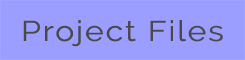
<style>
.page{position:relative;width:245px;height:60px;background:#9b9eff}
.page>*{position:absolute;margin:0}
.t1{font:28.5px "Raleway";letter-spacing:0.06em;color:#4b4848;scale:1.12 1}
</style>
<div class="page">
<p class="t1" style="left:23px;top:20px;width:200px;height:27px">Project Files</p>
</div>
